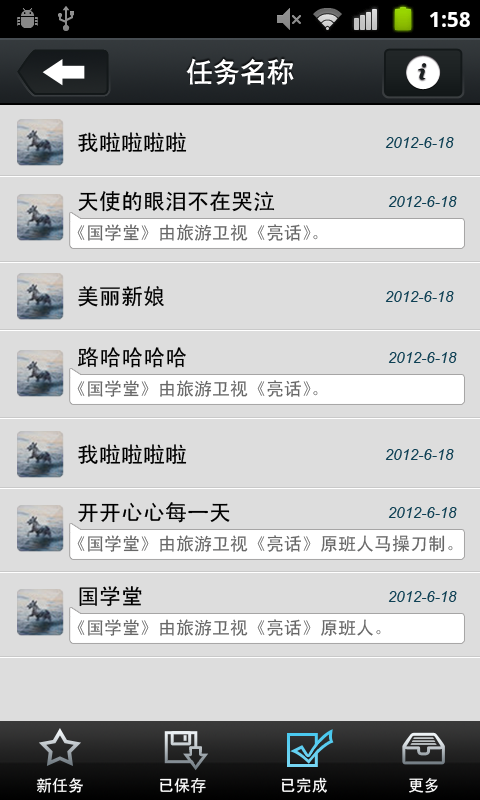
<style>
.page{position:relative;width:480px;height:800px;background:#dddddd}
.page>*{position:absolute;margin:0}
.t1{font:27px "CTCuHeiSJ";color:#ffffff}
.t2{font:22px "SimHei";color:#000000}
.t3{font:15px "Arial-ItalicMT";color:#0e4054}
.t4{font:18px "SimHei";color:#676767}
.t5{font:16px "SimHei";color:#ffffff}
</style>
<div class="page">
<p class="t1" style="left:186px;top:58px;width:108px;height:27px">任务名称</p>
<p class="t2" style="left:78px;top:132px;width:109px;height:20px">我啦啦啦啦</p>
<p class="t3" style="left:385px;top:137px;width:69px;height:11px">2012-6-18</p>
<p class="t2" style="left:78px;top:191px;width:197px;height:21px">天使的眼泪不在哭泣</p>
<p class="t3" style="left:388px;top:196px;width:69px;height:11px">2012-6-18</p>
<p class="t4" style="left:77px;top:224px;width:241px;height:17px">《国学堂》由旅游卫视《亮话》。</p>
<p class="t2" style="left:78px;top:286px;width:86px;height:21px">美丽新娘</p>
<p class="t3" style="left:385px;top:291px;width:69px;height:11px">2012-6-18</p>
<p class="t2" style="left:78px;top:347px;width:108px;height:21px">路哈哈哈哈</p>
<p class="t3" style="left:388px;top:352px;width:69px;height:11px">2012-6-18</p>
<p class="t4" style="left:77px;top:380px;width:241px;height:17px">《国学堂》由旅游卫视《亮话》。</p>
<p class="t2" style="left:78px;top:444px;width:109px;height:20px">我啦啦啦啦</p>
<p class="t3" style="left:385px;top:449px;width:69px;height:11px">2012-6-18</p>
<p class="t2" style="left:78px;top:502px;width:152px;height:21px">开开心心每一天</p>
<p class="t3" style="left:388px;top:507px;width:69px;height:11px">2012-6-18</p>
<p class="t4" style="left:77px;top:535px;width:376px;height:17px">《国学堂》由旅游卫视《亮话》原班人马操刀制。</p>
<p class="t2" style="left:79px;top:586px;width:63px;height:21px">国学堂</p>
<p class="t3" style="left:388px;top:591px;width:69px;height:11px">2012-6-18</p>
<p class="t4" style="left:77px;top:619px;width:304px;height:17px">《国学堂》由旅游卫视《亮话》原班人。</p>
<p class="t5" style="left:36px;top:778px;width:47px;height:15px">新任务</p>
<p class="t5" style="left:160px;top:778px;width:46px;height:15px">已保存</p>
<p class="t5" style="left:281px;top:777px;width:46px;height:16px">已完成</p>
<p class="t5" style="left:409px;top:777px;width:29px;height:16px">更多</p>
</div>
